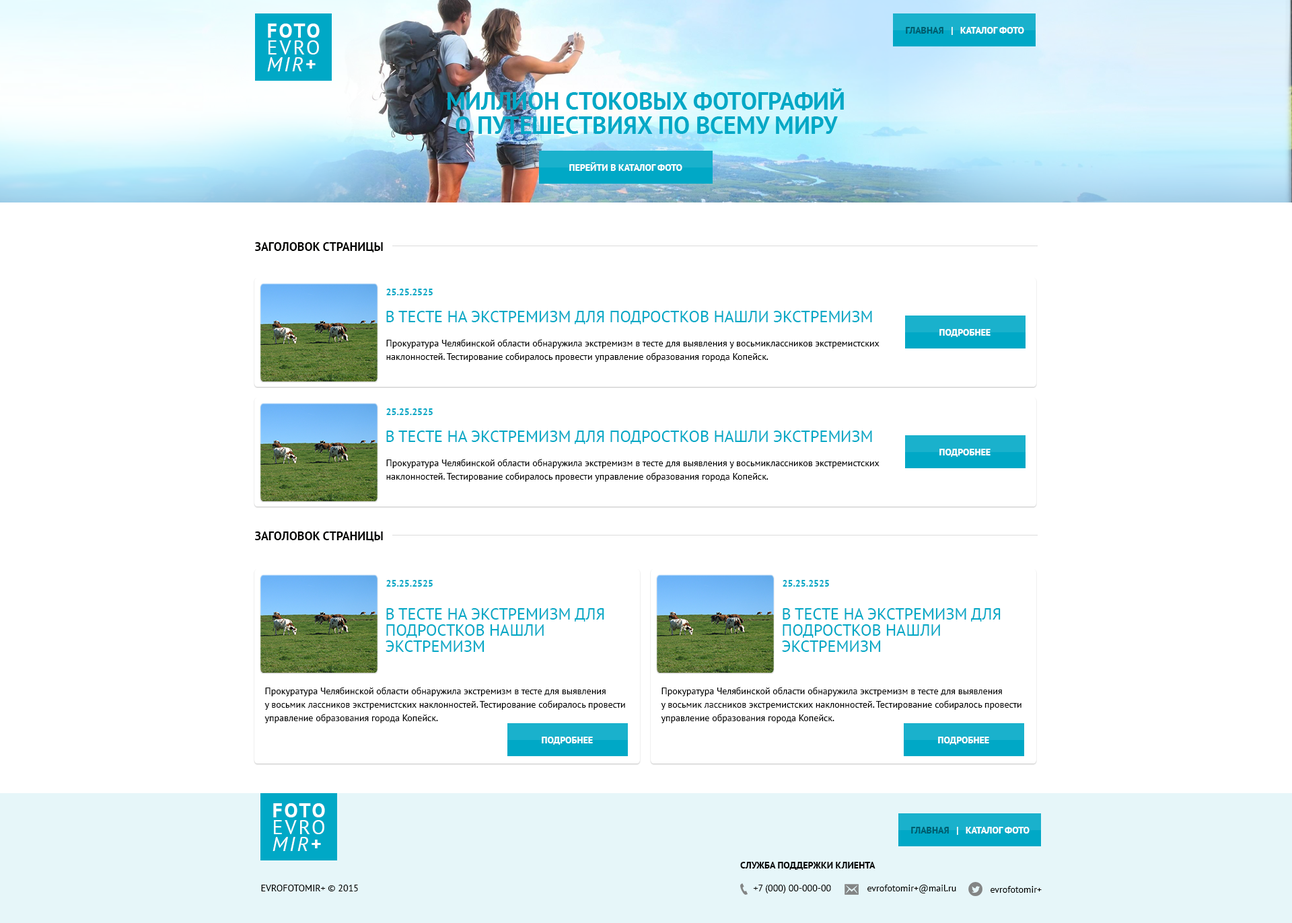
<style>
.page{position:relative;width:1292px;height:923px;background:#ffffff}
.page>*{position:absolute;margin:0}
.t1{font:20.2px/16.8px "PTSans-Bold";letter-spacing:0.1em;color:#ffffff;text-transform:uppercase}
.t2{font:20.2px/16.8px "PTSans-Regular";letter-spacing:0.1em;color:#ffffff;text-transform:uppercase}
.t3{font:20.2px/16.8px "PTSans-Italic";letter-spacing:0.1em;color:#ffffff;text-transform:uppercase}
.t4{font:20.2px/16.8px "PTSans-BoldItalic";letter-spacing:0.1em;color:#ffffff;text-transform:uppercase}
.t5{font:9.4px "PTSans-Bold";color:#ffffff;text-transform:uppercase}
.t6{font:9.4px "PTSans-Bold";color:#005c6d;text-transform:uppercase}
.t7{font:24.2px/24.2px "PTSans-Bold";color:#00a8c6;text-transform:uppercase}
.t8{font:12.1px "PTSans-Bold";color:#010100;text-transform:uppercase}
.t9{font:9.4px "PTSans-Bold";color:#00a8c6}
.t10{font:16.1px "PTSans-Regular";color:#00a8c6;text-transform:uppercase}
.t11{font:9.4px/13.5px "PTSans-Regular";color:#000000}
.t12{font:16.1px/16.1px "PTSans-Regular";color:#00a8c6;text-transform:uppercase}
.t13{font:9.4px "PTSans-Bold";color:#000000;text-transform:uppercase}
.t14{font:9.4px "PTSans-Regular";color:#010100;text-transform:uppercase}
.t15{font:9.4px "PTSans-Regular";color:#010100}
</style>
<div class="page">
<p class="t1" style="left:267px;top:24px;width:53px;height:47px;text-align:justify">FOTO<br><span class="t2">EVRO<br></span><span class="t3">MIR</span><span class="t4">+</span></p>
<p class="t5" style="left:906px;top:27px;width:118px;height:8px"><span class="t6">Главная   </span>|   Каталог фото</p>
<p class="t7" style="left:447px;top:88px;width:397px;height:46px;text-align:center">миллион стоковых фотографий<br>о путешествиях по всему миру</p>
<p class="t5" style="left:569px;top:162px;width:113px;height:9px">Перейти в Каталог фото</p>
<p class="t8" style="left:254px;top:242px;width:129px;height:10px">Заголовок страницы</p>
<p class="t9" style="left:386px;top:289px;width:47px;height:6px">25.25.2525</p>
<p class="t10" style="left:386px;top:311px;width:486px;height:13px">В тесте на экстремизм для подростков нашли экстремизм</p>
<p class="t5" style="left:939px;top:329px;width:51px;height:8px">подробнее</p>
<p class="t11" style="left:386px;top:339px;width:493px;height:23px">Прокуратура Челябинской области обнаружила экстремизм в тесте для выявления у восьмиклассников экстремистских<br>наклонностей. Тестирование собиралось провести управление образования города Копейск.</p>
<p class="t9" style="left:386px;top:408px;width:47px;height:7px">25.25.2525</p>
<p class="t10" style="left:386px;top:431px;width:486px;height:13px">В тесте на экстремизм для подростков нашли экстремизм</p>
<p class="t5" style="left:939px;top:449px;width:51px;height:8px">подробнее</p>
<p class="t11" style="left:386px;top:459px;width:493px;height:23px">Прокуратура Челябинской области обнаружила экстремизм в тесте для выявления у восьмиклассников экстремистских<br>наклонностей. Тестирование собиралось провести управление образования города Копейск.</p>
<p class="t8" style="left:254px;top:532px;width:129px;height:10px">Заголовок страницы</p>
<p class="t9" style="left:386px;top:580px;width:47px;height:7px">25.25.2525</p>
<p class="t9" style="left:782px;top:580px;width:47px;height:7px">25.25.2525</p>
<p class="t12" style="left:386px;top:608px;width:218px;height:44px">В тесте на экстремизм для<br>подростков нашли<br>экстремизм</p>
<p class="t12" style="left:782px;top:608px;width:218px;height:44px">В тесте на экстремизм для<br>подростков нашли<br>экстремизм</p>
<p class="t11" style="left:264px;top:687px;width:361px;height:36px">Прокуратура Челябинской области обнаружила экстремизм в тесте для выявления<br>у восьмик лассников экстремистских наклонностей. Тестирование собиралось провести<br>управление образования города Копейск.</p>
<p class="t11" style="left:661px;top:687px;width:360px;height:36px">Прокуратура Челябинской области обнаружила экстремизм в тесте для выявления<br>у восьмик лассников экстремистских наклонностей. Тестирование собиралось провести<br>управление образования города Копейск.</p>
<p class="t5" style="left:542px;top:737px;width:51px;height:8px">подробнее</p>
<p class="t5" style="left:938px;top:737px;width:51px;height:8px">подробнее</p>
<p class="t1" style="left:272px;top:803px;width:53px;height:48px;text-align:justify">FOTO<br><span class="t2">EVRO<br></span><span class="t3">MIR</span><span class="t4">+</span></p>
<p class="t5" style="left:911px;top:827px;width:118px;height:8px"><span class="t6">Главная   </span>|   Каталог фото</p>
<p class="t13" style="left:740px;top:862px;width:135px;height:8px">Служба поддержки клиента</p>
<p class="t14" style="left:261px;top:885px;width:97px;height:6px">EVROFOTOMIR+ © 2015</p>
<p class="t15" style="left:753px;top:885px;width:78px;height:8px">+7 (000) 00-000-00</p>
<p class="t15" style="left:867px;top:885px;width:89px;height:8px">evrofotomir+@mail.ru</p>
<p class="t15" style="left:990px;top:886px;width:52px;height:7px">evrofotomir+</p>
</div>
